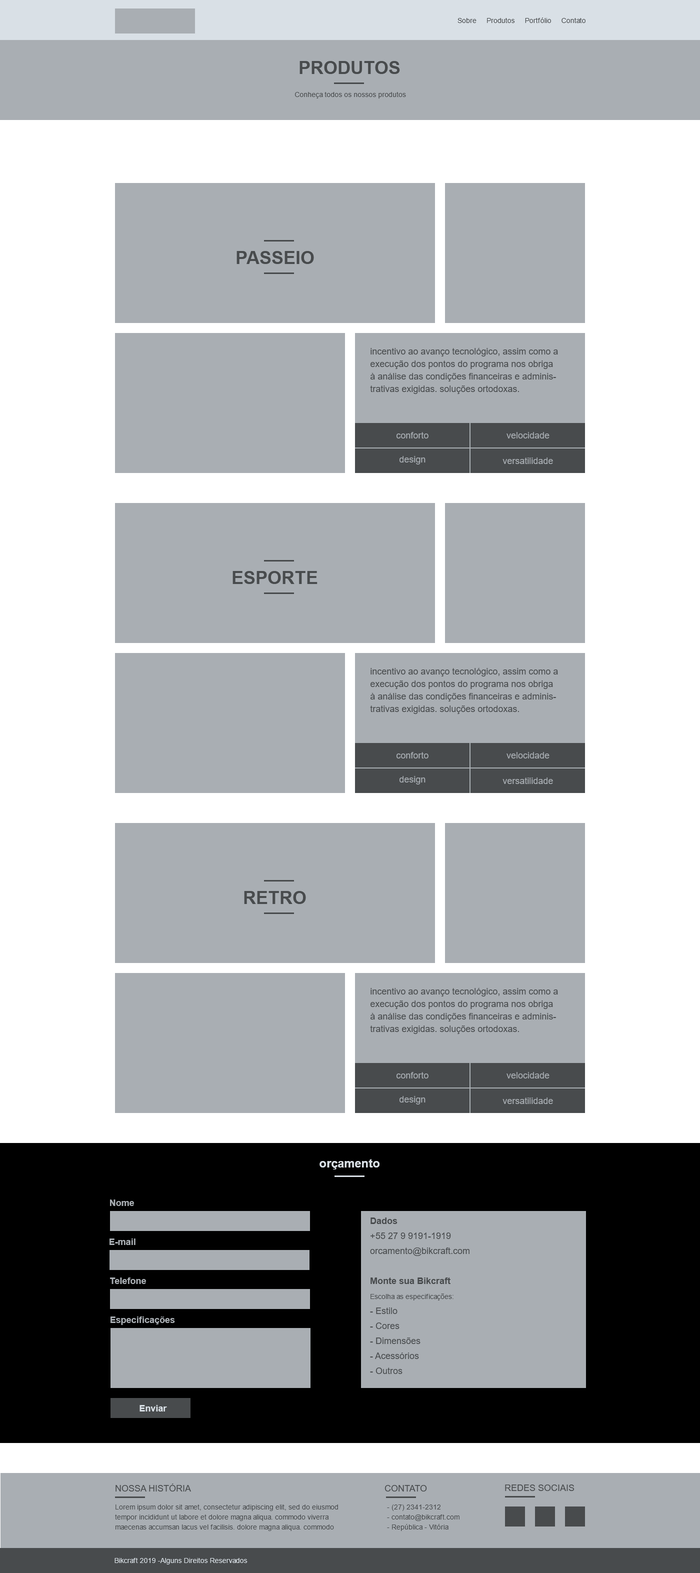
<style>
.page{position:relative;width:700px;height:1573px;background:#a9aeb3}
.page>*{position:absolute;margin:0}
.t1{font:7px "ArialMT";color:#484b4d}
.t2{font:18px "Arial-BoldMT";color:#484b4d;text-transform:uppercase}
.t3{font:9px/12.5px "ArialMT";color:#484b4d}
.t4{font:9px "ArialMT";color:#a9aeb3}
.t5{font:12px "Arial-BoldMT";color:#d9e0e6}
.t6{font:9px "Arial-BoldMT";color:#a9aeb3}
.t7{font:9px/15px "ArialMT";color:#484b4d}
.t8{font:9px/15px "Arial-BoldMT";color:#484b4d}
.t9{font:7px/15px "ArialMT";color:#484b4d}
.t10{font:9px "Arial-BoldMT";color:#d9e0e6}
.t11{font:9px "ArialMT";color:#484b4d;text-transform:uppercase}
.t12{font:7px/10px "ArialMT";color:#484b4d}
.t13{font:7px "ArialMT";color:#d9e0e6}
</style>
<div class="page">
<p class="t1" style="left:458px;top:18px;width:128px;height:5px">Sobre     Produtos     Portfólio     Contato</p>
<p class="t2" style="left:300px;top:61px;width:100px;height:13px">produtos</p>
<p class="t1" style="left:295px;top:92px;width:111px;height:6px">Conheça todos os nossos produtos</p>
<p class="t2" style="left:236px;top:251px;width:78px;height:13px">passeio</p>
<p class="t3" style="left:370px;top:348px;width:188px;height:46px">incentivo ao avanço tecnológico, assim como a execução dos pontos do programa nos obriga à análise das condições financeiras e administrativas exigidas. soluções ortodoxas.</p>
<p class="t4" style="left:396px;top:432px;width:32px;height:6px">conforto</p>
<p class="t4" style="left:506px;top:432px;width:44px;height:6px">velocidade</p>
<p class="t4" style="left:400px;top:456px;width:26px;height:8px">design</p>
<p class="t4" style="left:502px;top:458px;width:51px;height:6px">versatilidade</p>
<p class="t2" style="left:232px;top:571px;width:86px;height:13px">ESPORTE</p>
<p class="t3" style="left:370px;top:668px;width:188px;height:46px">incentivo ao avanço tecnológico, assim como a execução dos pontos do programa nos obriga à análise das condições financeiras e administrativas exigidas. soluções ortodoxas.</p>
<p class="t4" style="left:396px;top:752px;width:32px;height:6px">conforto</p>
<p class="t4" style="left:506px;top:752px;width:44px;height:6px">velocidade</p>
<p class="t4" style="left:400px;top:776px;width:26px;height:8px">design</p>
<p class="t4" style="left:502px;top:778px;width:51px;height:6px">versatilidade</p>
<p class="t2" style="left:244px;top:891px;width:62px;height:13px">RETRO</p>
<p class="t3" style="left:370px;top:988px;width:188px;height:46px">incentivo ao avanço tecnológico, assim como a execução dos pontos do programa nos obriga à análise das condições financeiras e administrativas exigidas. soluções ortodoxas.</p>
<p class="t4" style="left:396px;top:1072px;width:32px;height:6px">conforto</p>
<p class="t4" style="left:506px;top:1072px;width:44px;height:6px">velocidade</p>
<p class="t4" style="left:400px;top:1096px;width:26px;height:8px">design</p>
<p class="t4" style="left:502px;top:1098px;width:51px;height:6px">versatilidade</p>
<p class="t5" style="left:320px;top:1159px;width:60px;height:11px">orçamento</p>
<p class="t6" style="left:110px;top:1200px;width:24px;height:6px">Nome</p>
<p class="t7" style="left:370px;top:1218px;width:100px;height:156px"><span class="t8">Dados<br></span>+55 27 9 9191-1919<br>orcamento@bikcraft.com<br><br><span class="t8">Monte sua Bikcraft<br></span><span class="t9">Escolha as especificações:<br></span>- Estilo<br>- Cores<br>- Dimensões<br>- Acessórios<br>- Outros</p>
<p class="t6" style="left:110px;top:1238px;width:26px;height:7px">E-mail</p>
<p class="t6" style="left:110px;top:1278px;width:36px;height:6px">Telefone</p>
<p class="t6" style="left:110px;top:1316px;width:65px;height:9px">Especificações</p>
<p class="t10" style="left:140px;top:1405px;width:27px;height:7px">Enviar</p>
<p class="t11" style="left:116px;top:1484px;width:75px;height:8px">Nossa História</p>
<p class="t11" style="left:384px;top:1485px;width:43px;height:7px">contato</p>
<p class="t11" style="left:505px;top:1484px;width:69px;height:7px">redes sociais</p>
<p class="t12" style="left:115px;top:1504px;width:223px;height:27px">Lorem ipsum dolor sit amet, consectetur adipiscing elit, sed do eiusmod tempor incididunt ut labore et dolore magna aliqua. commodo viverra maecenas accumsan lacus vel facilisis. dolore magna aliqua. commodo</p>
<p class="t12" style="left:387px;top:1504px;width:73px;height:27px">- (27) 2341-2312<br> - contato@bikcraft.com<br> - República - Vitória</p>
<p class="t13" style="left:114px;top:1558px;width:134px;height:6px">Bikcraft 2019 -Alguns Direitos Reservados</p>
</div>
